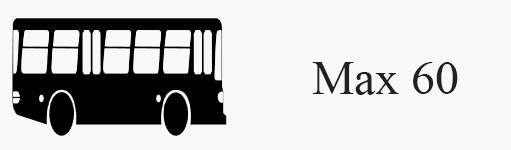
<style>
.page{position:relative;width:511px;height:150px;background:#f9f9f9}
.page>*{position:absolute;margin:0}
.t1{font:48px "TimesNewRomanPSMT";color:#231f20}
</style>
<div class="page">
<p class="t1" style="left:312px;top:62px;width:146px;height:33px">Max 60</p>
</div>
